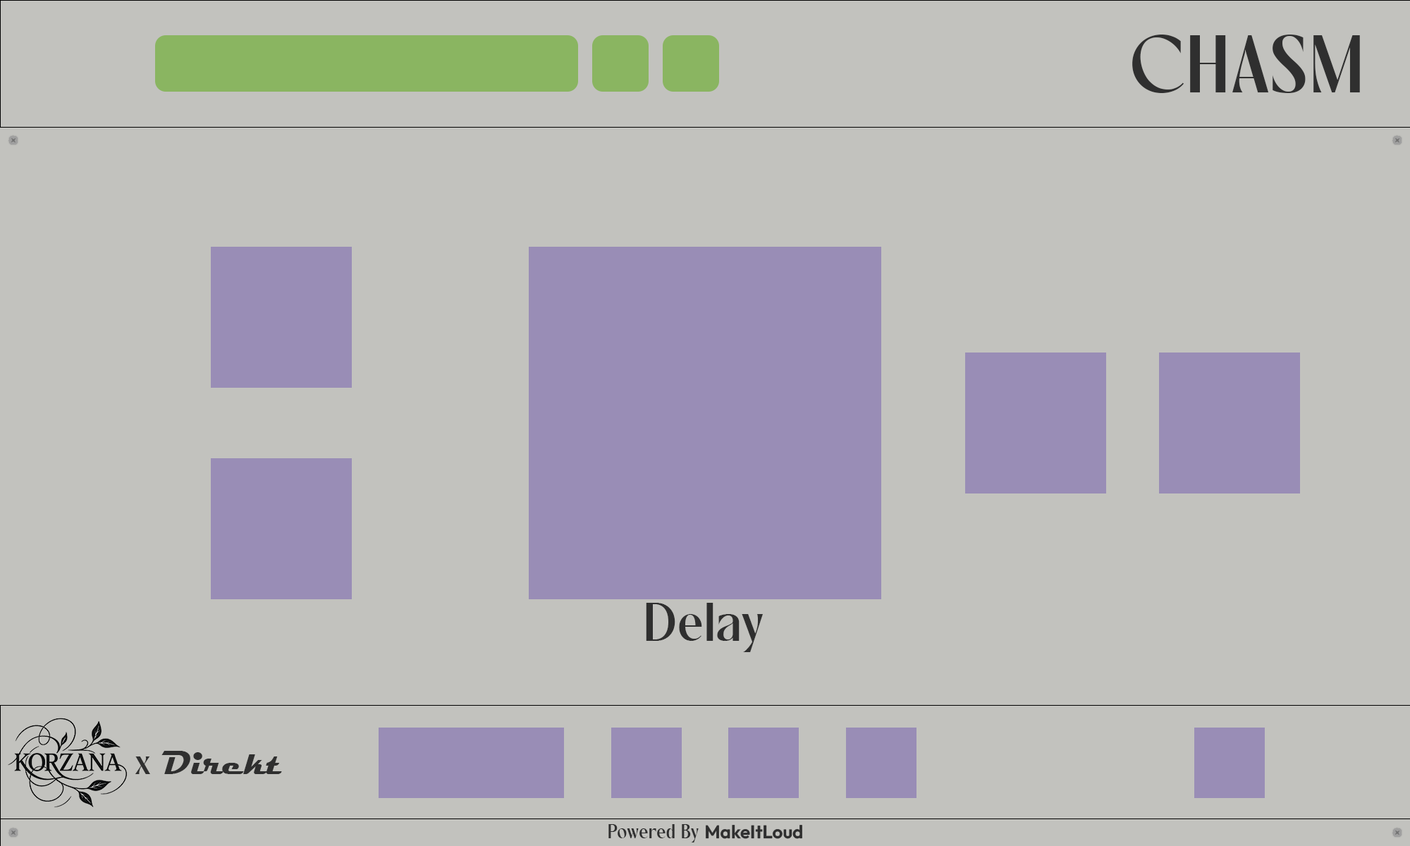
<style>
.page{position:relative;width:1410px;height:846px;background:#c2c2be}
.page>*{position:absolute;margin:0}
.t1{font:76.1px "Rovaney-Bold";color:#2f2f2f}
.t2{font:50.8px "Rovaney-Bold";color:#2f2f2f}
.t3{font:33.8px "Magneto-Bold";color:#2f2f2f}
.t4{font:33.8px "Rovaney-Bold";color:#2f2f2f}
.t5{font:18.3px "Rovaney-Bold";color:#2f2f2f}
.t6{font:18.3px "Outfit-SemiBold";color:#2f2f2f}
</style>
<div class="page">
<p class="t1" style="left:1132px;top:35px;width:228px;height:58px">CHASM</p>
<p class="t2" style="left:646px;top:603px;width:117px;height:49px">Delay</p>
<p class="t3" style="left:135px;top:751px;width:147px;height:23px"><span class="t4">x </span>Direkt</p>
<p class="t5" style="left:608px;top:824px;width:194px;height:18px">Powered By <span class="t6">MakeItLoud</span></p>
</div>
